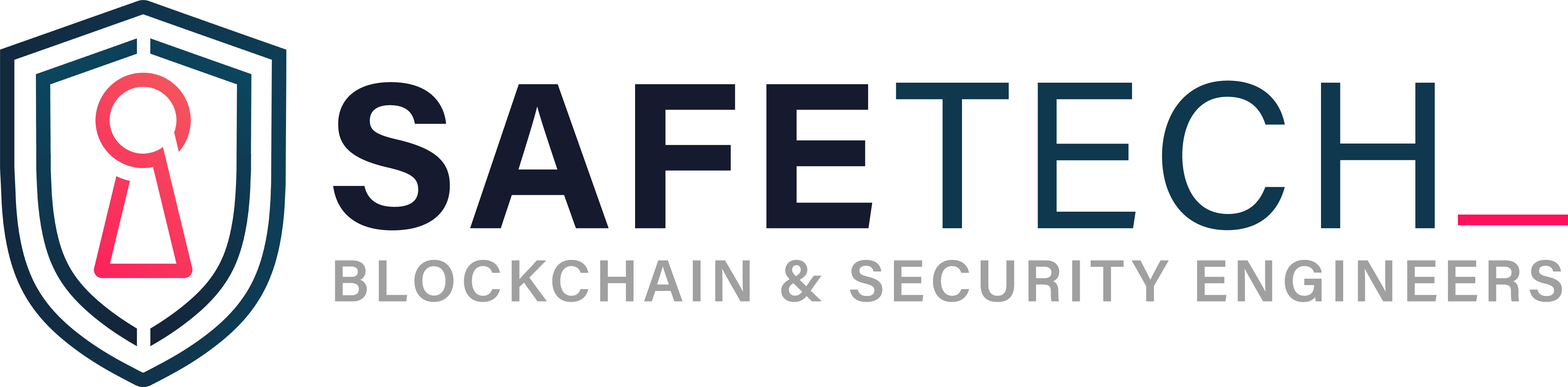
<style>
.page{position:relative;width:1568px;height:387px;background:#ffffff}
.page>*{position:absolute;margin:0}
.t1{font:208.7px "AcuminPro-Bold";letter-spacing:0.04em;color:#161a2e;text-transform:uppercase}
.t2{font:208.7px "AcuminPro-Regular";letter-spacing:0.04em;color:#0f374e;text-transform:uppercase}
.t3{font:208.7px "AcuminPro-Regular";letter-spacing:0.04em;color:#ff105c;text-transform:uppercase}
.t4{font:59px "AcuminPro-Semibold";letter-spacing:0.08em;color:#a0a0a0;text-transform:uppercase}
</style>
<div class="page">
<p class="t1" style="left:333px;top:80px;width:1102px;height:150px">Safe<span class="t2">Tech</span></p>
<p class="t3" style="left:1458px;top:214px;width:110px;height:11px">_</p>
<p class="t4" style="left:335px;top:259px;width:1227px;height:43px">Blockchain &amp; Security Engineers</p>
</div>
